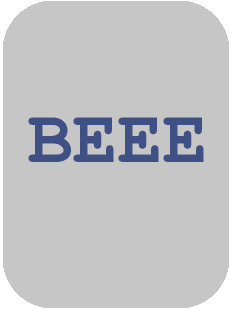
<style>
.page{position:relative;width:230px;height:310px;background:#c6c6c6}
.page>*{position:absolute;margin:0}
.t1{font:75px "CourierNewPS-BoldMT";color:#3e5084}
</style>
<div class="page">
<p class="t1" style="left:28px;top:117px;width:176px;height:45px">BEEE</p>
</div>
